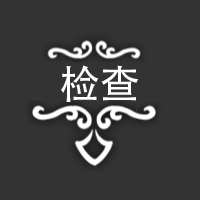
<style>
.page{position:relative;width:200px;height:200px;background:#333333}
.page>*{position:absolute;margin:0}
.t1{font:40px "AdobeHeitiStd-Regular";color:#fefefe}
</style>
<div class="page">
<p class="t1" style="left:61px;top:65px;width:78px;height:37px">检查</p>
</div>
